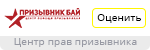
<style>
.page{position:relative;width:150px;height:50px;background:#ffffff}
.page>*{position:absolute;margin:0}
.t1{font:10px "OpenSans-Regular";letter-spacing:0.02em;color:#000000}
.t2{font:10px "OpenSans-Regular";letter-spacing:0.02em;color:#989aa4}
</style>
<div class="page">
<p class="t1" style="left:97px;top:14px;width:44px;height:9px">Оценить</p>
<p class="t2" style="left:14px;top:38px;width:123px;height:9px">Центр прав призывника</p>
</div>
